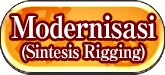
<style>
.page{position:relative;width:165px;height:75px;background:#720000}
.page>*{position:absolute;margin:0}
.t1{font:30px "RyuminPro-ExBold";letter-spacing:-0.04em;color:#ffffff;scale:0.9 1}
.t2{font:18px "RyuminPro-ExBold";letter-spacing:-0.04em;color:#ffffff;scale:0.9 1}
.t3{font:34px "RyuminPro-ExBold";letter-spacing:-0.04em;color:#ffffff;scale:0.9 1}
</style>
<div class="page">
<p class="t1" style="left:11px;top:15px;width:145px;height:24px">Modernisasi</p>
<p class="t2" style="left:22px;top:44px;width:123px;height:17px"><span class="t3"><br></span>(Sintesis Rigging)</p>
</div>
